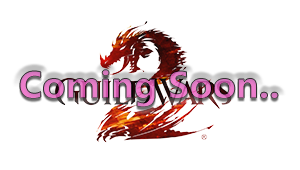
<style>
.page{position:relative;width:300px;height:170px;background:#ffffff}
.page>*{position:absolute;margin:0}
.t1{font:38px "SegoeUI-Bold"}
</style>
<div class="page">
<p class="t1" style="left:20px;top:69px;width:258px;height:38px">Coming Soon..</p>
</div>
